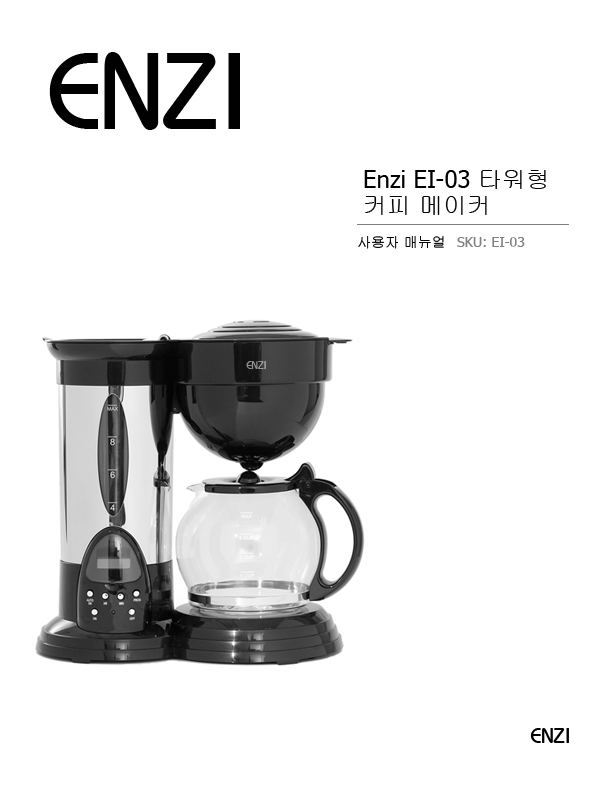
<style>
.page{position:relative;width:612px;height:792px;background:#ffffff}
.page>*{position:absolute;margin:0}
.t1{font:24px/26px "Gulim";color:#010101}
.t2{font:24px/26px "Tahoma";color:#010101}
.t3{font:14px "Gulim";color:#010101;text-transform:uppercase}
.t4{font:14px "Tahoma";color:#808080;text-transform:uppercase}
</style>
<div class="page">
<p class="t1" style="left:364px;top:170px;width:182px;height:45px"><span class="t2">Enzi EI-03 </span>타워형 <br>커피 메이커</p>
<p class="t3" style="left:358px;top:236px;width:86px;height:13px">사용자 매뉴얼</p>
<p class="t4" style="left:457px;top:237px;width:68px;height:10px">SKU: EI-03</p>
</div>
